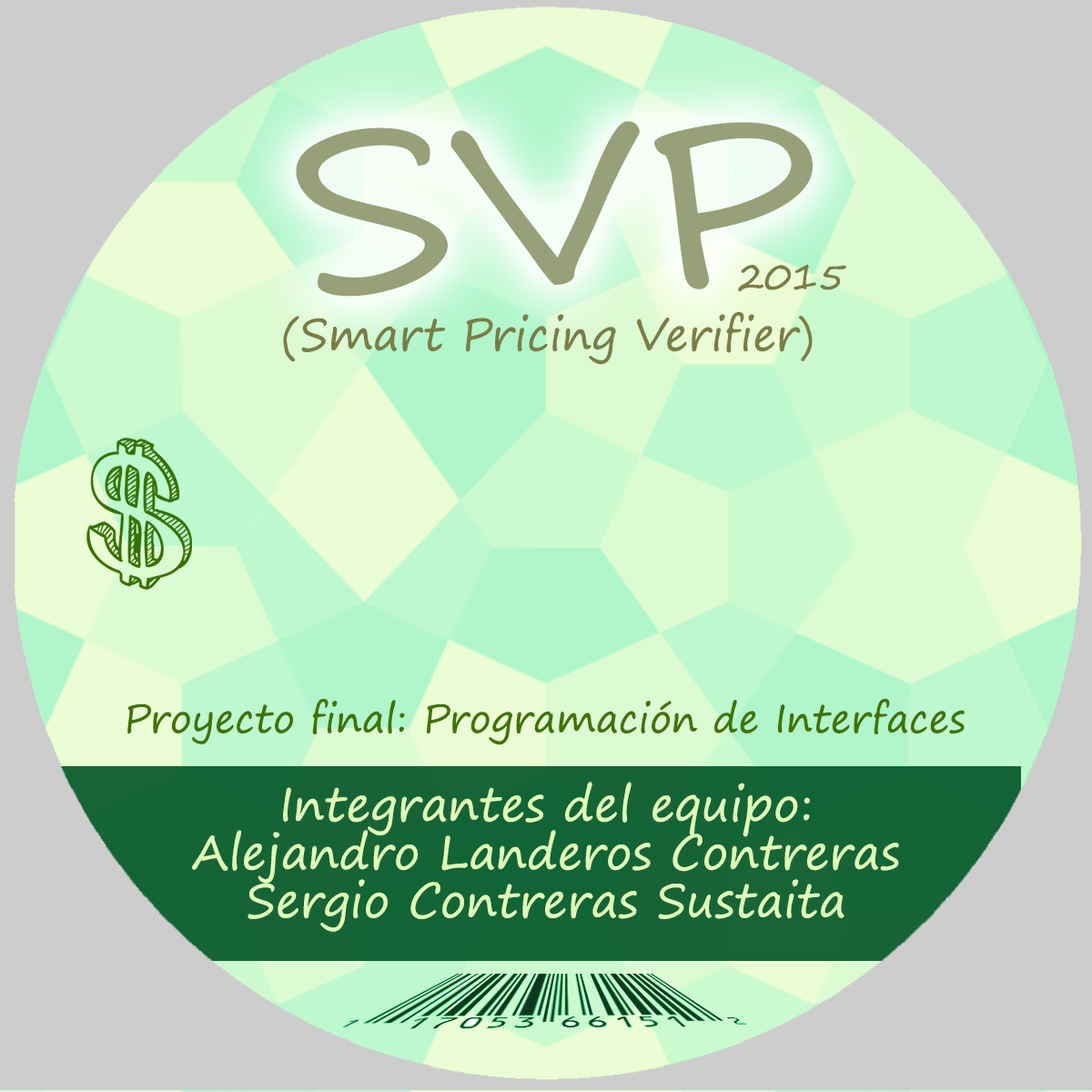
<style>
.page{position:relative;width:1092px;height:1092px;background:#cdcdcd}
.page>*{position:absolute;margin:0}
.t1{font:227.5px "SegoePrint";color:#97a078;scale:1.15 1}
.t2{font:36.8px "SegoePrint";color:#7b7d46}
.t3{font:44.5px "SegoePrint";color:#7b7d46}
.t4{font:39.1px "SegoePrint";color:#417300}
.t5{font:46.5px/9.6px "SegoePrint";color:#dffeb7}
</style>
<div class="page">
<p class="t1" style="left:296px;top:121px;width:517px;height:176px;rotate:-1deg">SVP</p>
<p class="t2" style="left:738px;top:264px;width:108px;height:28px">2015</p>
<p class="t3" style="left:283px;top:311px;width:530px;height:54px">(Smart Pricing Verifier)</p>
<p class="t4" style="left:127px;top:698px;width:838px;height:47px">Proyecto final: Programación de Interfaces</p>
<p class="t5" style="left:191px;top:782px;width:708px;height:150px;text-align:center">Integrantes del equipo:<br><br><br><br><br>Alejandro Landeros Contreras<br><br><br><br><br>Sergio Contreras Sustaita</p>
</div>
